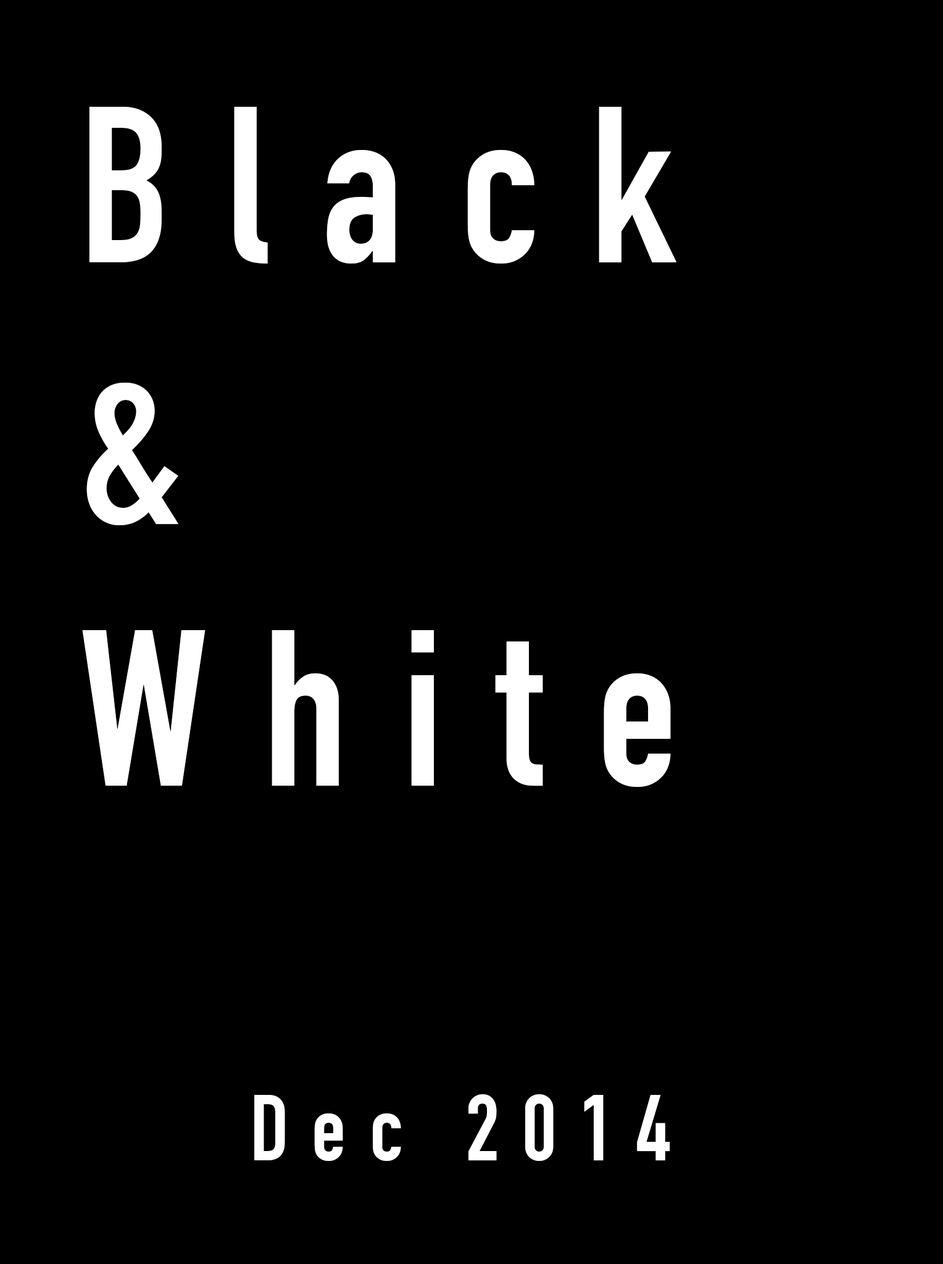
<style>
.page{position:relative;width:943px;height:1264px;background:#000000}
.page>*{position:absolute;margin:0}
.t1{font:218.3px "DINCondensed-Bold";letter-spacing:0.25em;color:#ffffff}
.t2{font:91.7px "DINCondensed-Bold";letter-spacing:0.25em;color:#ffffff}
</style>
<div class="page">
<p class="t1" style="left:82px;top:107px;width:595px;height:680px">Black<br>&amp;<br>White</p>
<p class="t2" style="left:254px;top:1094px;width:416px;height:67px">Dec 2014</p>
</div>
